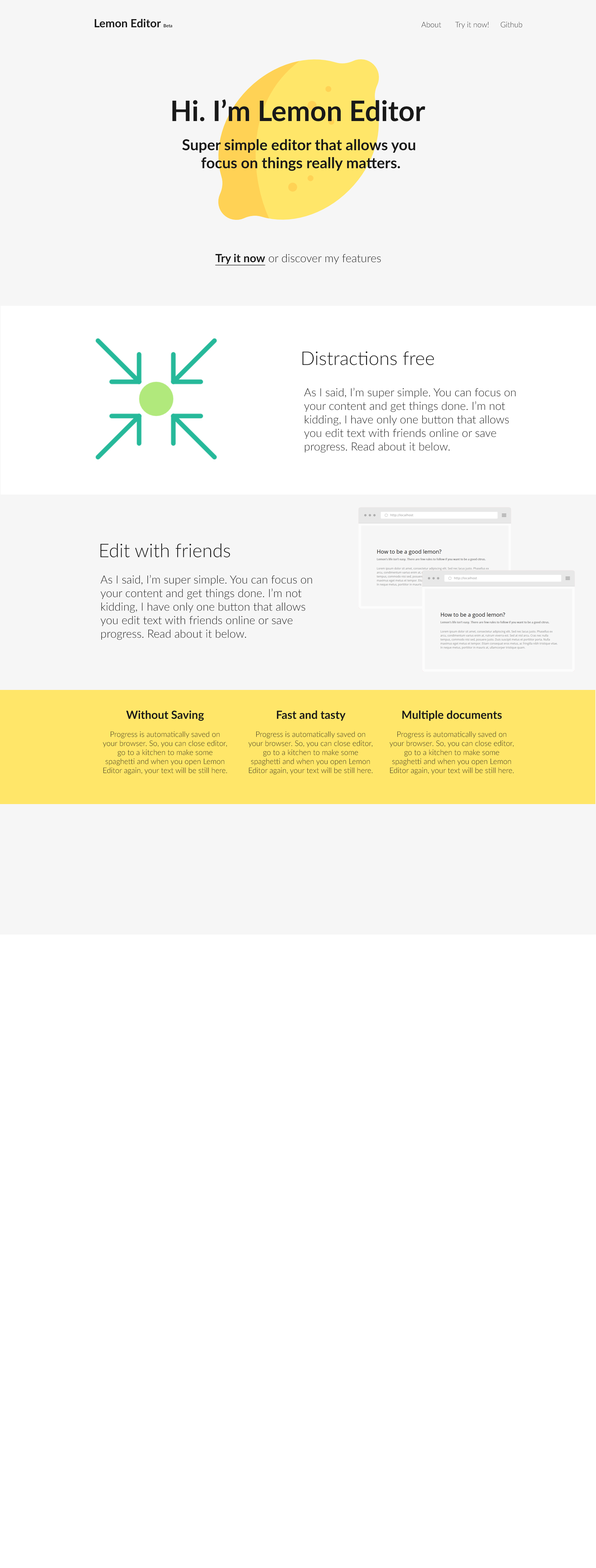
<style>
.page{position:relative;width:596px;height:1568px;background:#ffffff}
.page>*{position:absolute;margin:0}
.t1{font:7.5px "Lato-Light";color:#191919}
.t2{font:11.3px "Lato-Bold";color:#191919}
.t3{font:4.4px "Lato-Bold";color:#191919}
.t4{font:28.2px "Lato-Bold";color:#191919}
.t5{font:15.1px "Lato-Bold";color:#191919}
.t6{font:11.3px "Lato-Light";color:#191919}
.t7{font:11.3px "Lato-Bold";color:#191919;text-decoration:underline}
.t8{font:18.8px "Lato-Light";color:#191919}
</style>
<div class="page">
<p class="t1" style="left:95px;top:19px;width:427px;height:10px"><span class="t2">Lemon Editor </span><span class="t3">Beta                       </span>About  Try it now! Github</p>
<p class="t4" style="left:172px;top:99px;width:253px;height:22px">Hi. I’m Lemon Editor</p>
<p class="t5" style="left:182px;top:139px;width:233px;height:32px;text-align:center">Super simple editor that allows you <br>focus on things really matters.</p>
<p class="t6" style="left:215px;top:254px;width:166px;height:12px"><span class="t7">Try it now</span> or discover my features</p>
<p class="t8" style="left:302px;top:351px;width:132px;height:14px">Distractions free</p>
<p class="t6" style="left:304px;top:388px;width:212px;height:65px">As I said, I’m super simple. You can focus on<br>your content and get things done. I’m not<br>kidding, I have only one button that allows <br>you edit text with friends online or save<br>progress. Read about it below.</p>
<p class="t8" style="left:100px;top:543px;width:130px;height:15px">Edit with friends</p>
<p class="t6" style="left:100px;top:575px;width:212px;height:65px">As I said, I’m super simple. You can focus on<br>your content and get things done. I’m not<br>kidding, I have only one button that allows <br>you edit text with friends online or save<br>progress. Read about it below.</p>
<p class="t1" style="left:103px;top:710px;width:124px;height:65px;text-align:center"><span class="t2">Without Saving<br></span><br>Progress is automatically saved on your browser. So, you can close editor, go to a kitchen to make some spaghetti and when you open Lemon Editor again, your text will be still here.</p>
<p class="t1" style="left:248px;top:710px;width:125px;height:65px;text-align:center"><span class="t2">Fast and tasty<br></span><br>Progress is automatically saved on your browser. So, you can close editor, go to a kitchen to make some spaghetti and when you open Lemon Editor again, your text will be still here.</p>
<p class="t1" style="left:389px;top:710px;width:125px;height:65px;text-align:center"><span class="t2">Multiple documents<br></span><br>Progress is automatically saved on your browser. So, you can close editor, go to a kitchen to make some spaghetti and when you open Lemon Editor again, your text will be still here.</p>
</div>
